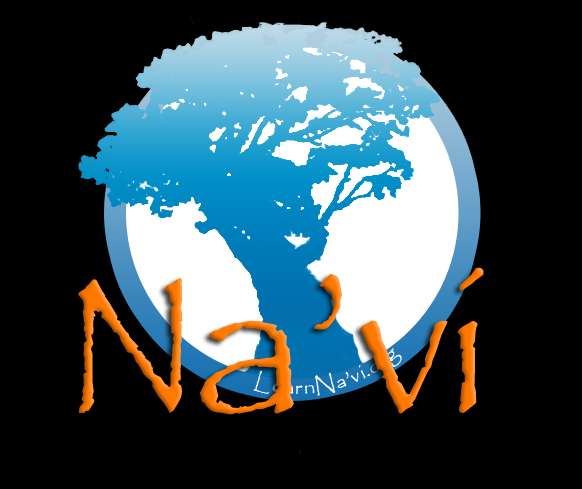
<style>
.page{position:relative;width:582px;height:489px;background:#000000}
.page>*{position:absolute;margin:0}
.t1{font:200px "Papyrus"}
</style>
<div class="page">
<p class="t1" style="left:78px;top:267px;width:406px;height:148px">Na’vi</p>
</div>
